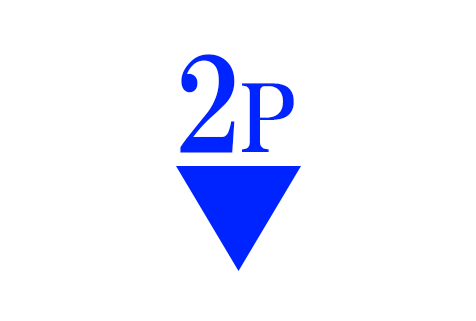
<style>
.page{position:relative;width:476px;height:321px;background:#ffffff}
.page>*{position:absolute;margin:0}
.t1{font:133.3px "HGSMinchoE";color:#0024ff;font-variant:small-caps}
</style>
<div class="page">
<p class="t1" style="left:180px;top:54px;width:114px;height:99px">2p</p>
</div>
